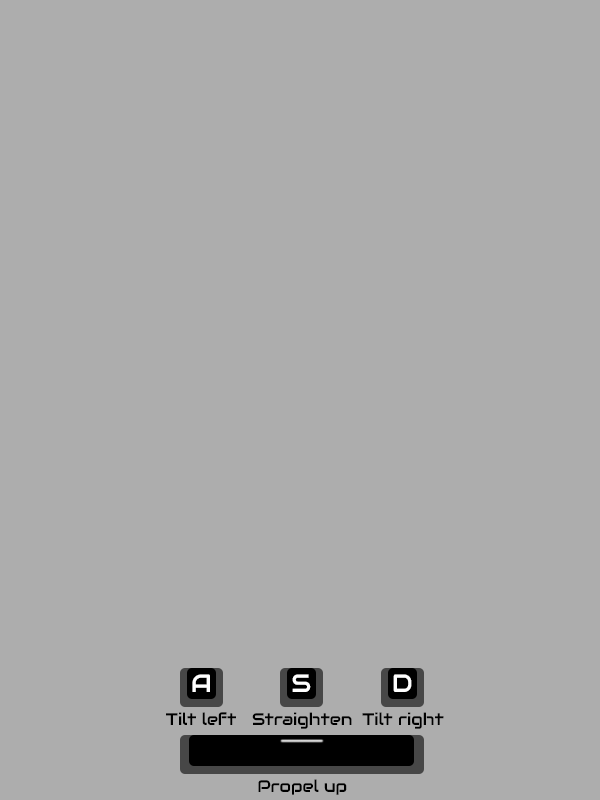
<style>
.page{position:relative;width:600px;height:800px;background:#adadad}
.page>*{position:absolute;margin:0}
.t1{font:25px "Audiowide-Regular";color:#ffffff}
.t2{font:16.7px "Audiowide-Regular";color:#000000}
</style>
<div class="page">
<p class="t1" style="left:192px;top:674px;width:18px;height:18px">A</p>
<p class="t1" style="left:292px;top:674px;width:19px;height:18px">S</p>
<p class="t1" style="left:393px;top:674px;width:19px;height:18px">D</p>
<p class="t2" style="left:166px;top:712px;width:70px;height:13px">Tilt left</p>
<p class="t2" style="left:252px;top:712px;width:100px;height:17px">Straighten</p>
<p class="t2" style="left:362px;top:712px;width:82px;height:17px">Tilt right</p>
<p class="t2" style="left:258px;top:779px;width:89px;height:16px">Propel up</p>
</div>
